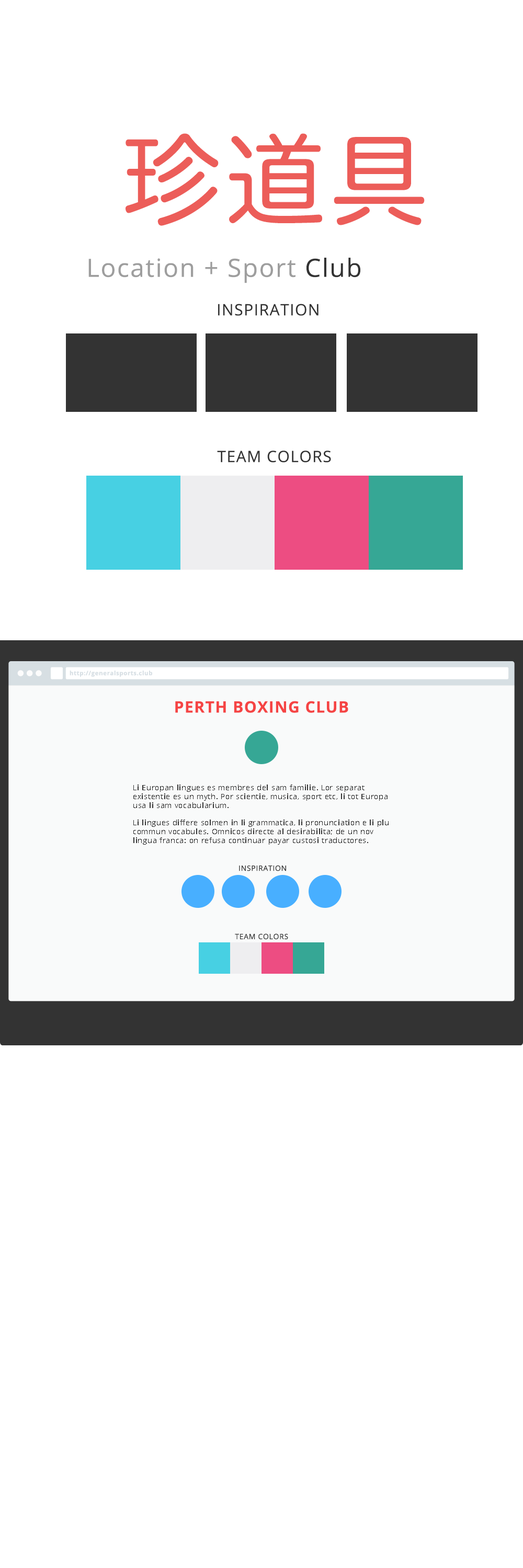
<style>
.page{position:relative;width:523px;height:1568px;background:#ffffff}
.page>*{position:absolute;margin:0}
.t1{font:98.6px "HiraMaruProN-W4";letter-spacing:0.05em;color:#ec5d59}
.t2{font:25.1px "OpenSans";letter-spacing:0.05em;color:#9e9e9e}
.t3{font:25.1px "OpenSans";letter-spacing:0.05em;color:#333333}
.t4{font:15.7px "OpenSans";letter-spacing:0.05em;color:#333333}
.t5{font:6px "OpenSans-Bold";letter-spacing:0.05em;color:#d7dfe4}
.t6{font:15.7px "OpenSans-Bold";letter-spacing:0.05em;color:#f54444}
.t7{font:7.3px "OpenSans";letter-spacing:0.05em;color:#333333}
</style>
<div class="page">
<p class="t1" style="left:125px;top:133px;width:299px;height:93px">珍道具</p>
<p class="t2" style="left:88px;top:258px;width:272px;height:25px">Location + Sport <span class="t3">Club</span></p>
<p class="t4" style="left:218px;top:304px;width:100px;height:12px">INSPIRATION</p>
<p class="t4" style="left:217px;top:451px;width:114px;height:12px">TEAM COLORS</p>
<p class="t5" style="left:70px;top:671px;width:82px;height:6px">http://generalsports.club</p>
<p class="t6" style="left:175px;top:701px;width:173px;height:12px">PERTH BOXING CLUB</p>
<p class="t7" style="left:133px;top:785px;width:255px;height:60px">Li Europan lingues es membres del sam familie. Lor separat existentie es un myth. Por scientie, musica, sport etc, li tot Europa usa li sam vocabularium. <br><br>Li lingues differe solmen in li grammatica, li pronunciation e li plu commun vocabules. Omnicos directe al desirabilita; de un nov lingua franca: on refusa continuar payar custosi traductores.</p>
<p class="t7" style="left:239px;top:865px;width:47px;height:6px">INSPIRATION</p>
<p class="t7" style="left:235px;top:933px;width:53px;height:6px">TEAM COLORS</p>
</div>
